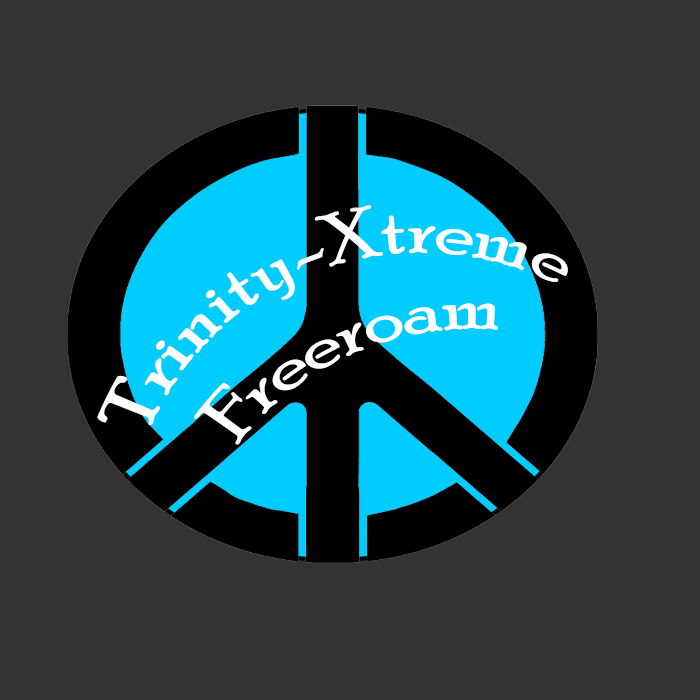
<style>
.page{position:relative;width:700px;height:700px;background:#333333}
.page>*{position:absolute;margin:0}
.t1{font:60px "PoorRichard-Regular";color:#ffffff}
</style>
<div class="page">
<p class="t1" style="left:97px;top:205px;width:471px;height:220px">Trinity-Xtreme</p>
<p class="t1" style="left:194px;top:303px;width:304px;height:142px">Freeroam</p>
</div>
